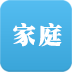
<style>
.page{position:relative;width:72px;height:72px}
.page>*{position:absolute;margin:0}
.t1{font:24px "¾­µäÌØËÎ¼ò Regular";letter-spacing:0.1em;color:#ffffff}
</style>
<div class="page">
<p class="t1" style="left:13px;top:23px;width:49px;height:24px">家庭</p>
</div>
